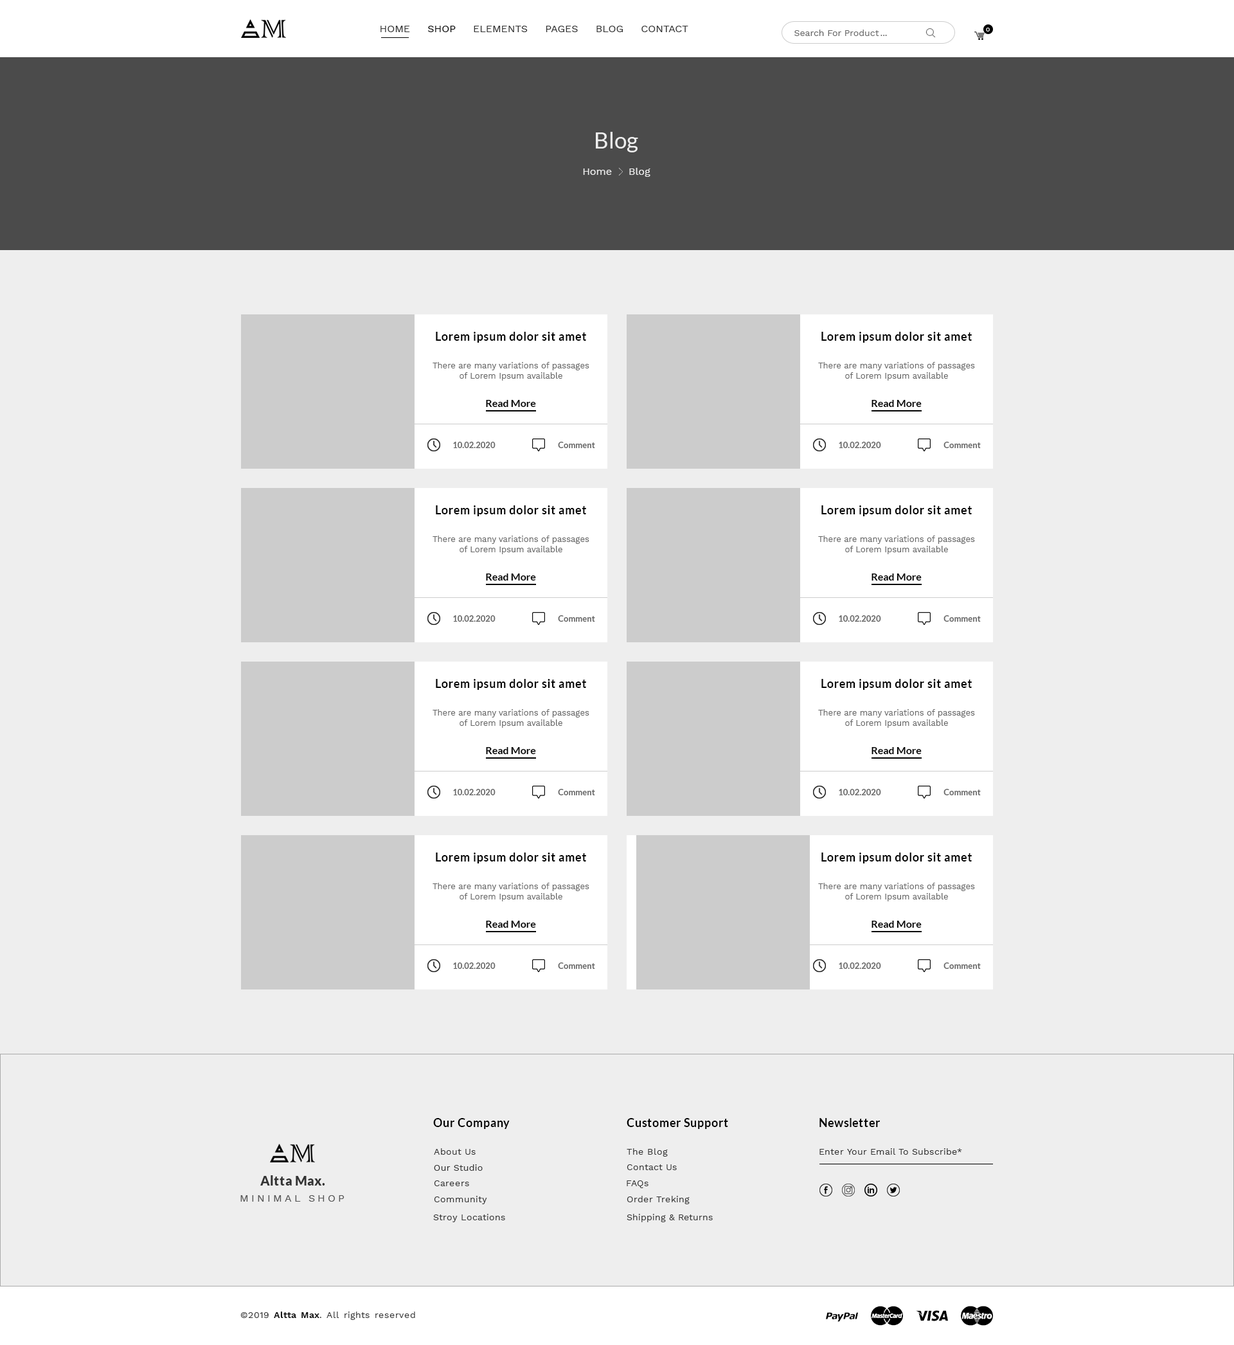
<style>
.page{position:relative;width:1234px;height:1345px;background:#eeeeee}
.page>*{position:absolute;margin:0}
.t1{font:10.3px "WorkSans-Regular";color:#333333}
.t2{font:10.3px "WorkSans-Regular";color:#000000}
.t3{font:9px "WorkSans-Regular";color:#666666}
.t4{font:6.4px "WorkSans-Regular";color:#ffffff}
.t5{font:22.5px "Lato-Regular";color:#eeeeee}
.t6{font:10.3px "WorkSans-Regular";color:#eeeeee}
.t7{font:11.6px "Lato-Bold";letter-spacing:0.04em;color:#000000}
.t8{font:8.4px "WorkSans-Regular";color:#666666}
.t9{font:10.3px "Lato-Bold";color:#000000}
.t10{font:8.4px "Lato-Bold";color:#666666}
.t11{font:11.6px "Lato-Bold";letter-spacing:0.03em;color:#000000}
.t12{font:9px "WorkSans-Regular";letter-spacing:0.03em;color:#333333}
.t13{font:12.9px "Lato-Black";letter-spacing:0.03em;color:#333333}
.t14{font:10.3px "WorkSans-Regular";letter-spacing:0.25em;color:#555555}
.t15{font:9px "WorkSans-SemiBold";letter-spacing:0.03em;color:#000000}
</style>
<div class="page">
<p class="t1" style="left:381px;top:26px;width:307px;height:6px">HOME     <span class="t2">SHOP</span>     ELEMENTS     PAGES     BLOG     CONTACT</p>
<p class="t3" style="left:795px;top:30px;width:84px;height:6px">Search For Product</p>
<p class="t4" style="left:986px;top:28px;width:4px;height:4px">0</p>
<p class="t3" style="left:881px;top:35px;width:6px;height:1px">...</p>
<p class="t5" style="left:596px;top:132px;width:42px;height:20px">Blog</p>
<p class="t6" style="left:583px;top:168px;width:29px;height:7px">Home</p>
<p class="t6" style="left:629px;top:168px;width:22px;height:9px">Blog</p>
<p class="t7" style="left:436px;top:332px;width:150px;height:11px">Lorem ipsum dolor sit amet</p>
<p class="t7" style="left:822px;top:332px;width:150px;height:11px">Lorem ipsum dolor sit amet</p>
<p class="t8" style="left:433px;top:362px;width:157px;height:19px;text-align:center">There are many variations of passages of Lorem Ipsum available</p>
<p class="t8" style="left:818px;top:362px;width:157px;height:19px;text-align:center">There are many variations of passages of Lorem Ipsum available</p>
<p class="t9" style="left:486px;top:400px;width:50px;height:7px">Read More</p>
<p class="t9" style="left:872px;top:400px;width:50px;height:7px">Read More</p>
<p class="t10" style="left:453px;top:442px;width:43px;height:6px">10.02.2020</p>
<p class="t10" style="left:558px;top:442px;width:37px;height:6px">Comment</p>
<p class="t10" style="left:839px;top:442px;width:42px;height:6px">10.02.2020</p>
<p class="t10" style="left:944px;top:442px;width:37px;height:6px">Comment</p>
<p class="t7" style="left:436px;top:505px;width:150px;height:11px">Lorem ipsum dolor sit amet</p>
<p class="t7" style="left:822px;top:505px;width:150px;height:11px">Lorem ipsum dolor sit amet</p>
<p class="t8" style="left:433px;top:536px;width:157px;height:18px;text-align:center">There are many variations of passages of Lorem Ipsum available</p>
<p class="t8" style="left:818px;top:536px;width:157px;height:18px;text-align:center">There are many variations of passages of Lorem Ipsum available</p>
<p class="t9" style="left:486px;top:573px;width:50px;height:7px">Read More</p>
<p class="t9" style="left:872px;top:573px;width:50px;height:7px">Read More</p>
<p class="t10" style="left:453px;top:615px;width:43px;height:7px">10.02.2020</p>
<p class="t10" style="left:558px;top:615px;width:37px;height:7px">Comment</p>
<p class="t10" style="left:839px;top:615px;width:42px;height:7px">10.02.2020</p>
<p class="t10" style="left:944px;top:615px;width:37px;height:7px">Comment</p>
<p class="t7" style="left:436px;top:679px;width:150px;height:11px">Lorem ipsum dolor sit amet</p>
<p class="t7" style="left:822px;top:679px;width:150px;height:11px">Lorem ipsum dolor sit amet</p>
<p class="t8" style="left:433px;top:709px;width:157px;height:19px;text-align:center">There are many variations of passages of Lorem Ipsum available</p>
<p class="t8" style="left:818px;top:709px;width:157px;height:19px;text-align:center">There are many variations of passages of Lorem Ipsum available</p>
<p class="t9" style="left:486px;top:747px;width:50px;height:7px">Read More</p>
<p class="t9" style="left:872px;top:747px;width:50px;height:7px">Read More</p>
<p class="t10" style="left:453px;top:789px;width:43px;height:6px">10.02.2020</p>
<p class="t10" style="left:558px;top:789px;width:37px;height:6px">Comment</p>
<p class="t10" style="left:839px;top:789px;width:42px;height:6px">10.02.2020</p>
<p class="t10" style="left:944px;top:789px;width:37px;height:6px">Comment</p>
<p class="t7" style="left:436px;top:852px;width:150px;height:11px">Lorem ipsum dolor sit amet</p>
<p class="t7" style="left:822px;top:852px;width:150px;height:11px">Lorem ipsum dolor sit amet</p>
<p class="t8" style="left:433px;top:883px;width:157px;height:18px;text-align:center">There are many variations of passages of Lorem Ipsum available</p>
<p class="t8" style="left:818px;top:883px;width:157px;height:18px;text-align:center">There are many variations of passages of Lorem Ipsum available</p>
<p class="t9" style="left:486px;top:921px;width:50px;height:7px">Read More</p>
<p class="t9" style="left:872px;top:921px;width:50px;height:7px">Read More</p>
<p class="t10" style="left:453px;top:962px;width:43px;height:7px">10.02.2020</p>
<p class="t10" style="left:558px;top:962px;width:37px;height:7px">Comment</p>
<p class="t10" style="left:839px;top:962px;width:42px;height:7px">10.02.2020</p>
<p class="t10" style="left:944px;top:962px;width:37px;height:7px">Comment</p>
<p class="t11" style="left:433px;top:1118px;width:77px;height:11px">Our Company</p>
<p class="t11" style="left:627px;top:1118px;width:101px;height:11px">Customer Support</p>
<p class="t11" style="left:820px;top:1118px;width:60px;height:9px">Newsletter</p>
<p class="t12" style="left:434px;top:1148px;width:42px;height:7px">About Us</p>
<p class="t12" style="left:627px;top:1148px;width:41px;height:8px">The Blog</p>
<p class="t12" style="left:820px;top:1148px;width:142px;height:7px">Enter Your Email To Subscribe*</p>
<p class="t12" style="left:434px;top:1164px;width:49px;height:7px">Our Studio</p>
<p class="t12" style="left:627px;top:1164px;width:50px;height:6px">Contact Us</p>
<p class="t13" style="left:260px;top:1175px;width:65px;height:10px">Altta Max.</p>
<p class="t12" style="left:434px;top:1180px;width:35px;height:6px">Careers</p>
<p class="t12" style="left:627px;top:1180px;width:22px;height:8px">FAQs</p>
<p class="t14" style="left:240px;top:1195px;width:105px;height:7px">MINIMAL SHOP</p>
<p class="t12" style="left:434px;top:1196px;width:53px;height:8px">Community</p>
<p class="t12" style="left:627px;top:1196px;width:63px;height:8px">Order Treking</p>
<p class="t12" style="left:433px;top:1214px;width:72px;height:8px">Stroy Locations</p>
<p class="t12" style="left:627px;top:1214px;width:86px;height:8px">Shipping &amp; Returns</p>
<p class="t12" style="left:240px;top:1311px;width:175px;height:9px">©2019 <span class="t15">Altta Max</span>. All rights reserved</p>
</div>
